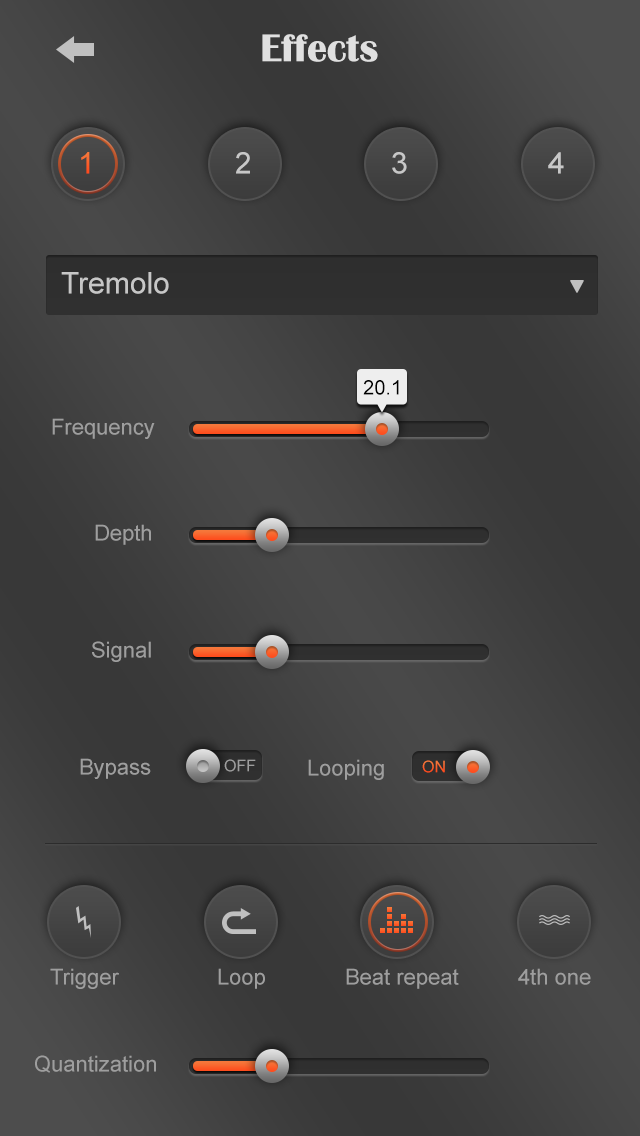
<style>
.page{position:relative;width:640px;height:1136px}
.page>*{position:absolute;margin:0}
.t1{font:40px "BritannicBold";color:#e0e0e0}
.t2{font:30px "ArialMT";color:#f9682f}
.t3{font:30px "ArialMT";color:#c7c7c7}
.t4{font:20px "ArialMT";color:#000000}
.t5{font:22px "ArialMT";color:#9e9e9e}
.t6{font:16px "ArialMT";color:#9e9e9e}
.t7{font:16px "ArialMT";color:#f9632d}
</style>
<div class="page">
<p class="t1" style="left:262px;top:34px;width:116px;height:28px">Effects</p>
<p class="t2" style="left:81px;top:152px;width:9px;height:22px">1</p>
<p class="t3" style="left:236px;top:152px;width:14px;height:22px">2</p>
<p class="t3" style="left:392px;top:152px;width:15px;height:22px">3</p>
<p class="t3" style="left:548px;top:152px;width:16px;height:22px">4</p>
<p class="t3" style="left:61px;top:272px;width:108px;height:22px">Tremolo</p>
<p class="t4" style="left:363px;top:380px;width:36px;height:15px">20.1</p>
<p class="t5" style="left:52px;top:418px;width:103px;height:21px">Frequency</p>
<p class="t5" style="left:95px;top:524px;width:56px;height:21px">Depth</p>
<p class="t5" style="left:92px;top:641px;width:59px;height:21px">Signal</p>
<p class="t5" style="left:80px;top:758px;width:71px;height:21px">Bypass</p>
<p class="t6" style="left:224px;top:759px;width:32px;height:13px">OFF</p>
<p class="t5" style="left:308px;top:759px;width:76px;height:21px">Looping</p>
<p class="t7" style="left:422px;top:760px;width:23px;height:13px">ON</p>
<p class="t5" style="left:50px;top:968px;width:69px;height:21px">Trigger</p>
<p class="t5" style="left:218px;top:968px;width:47px;height:21px">Loop</p>
<p class="t5" style="left:346px;top:968px;width:113px;height:21px">Beat repeat</p>
<p class="t5" style="left:518px;top:968px;width:73px;height:17px">4th one</p>
<p class="t5" style="left:35px;top:1055px;width:121px;height:18px">Quantization</p>
</div>
